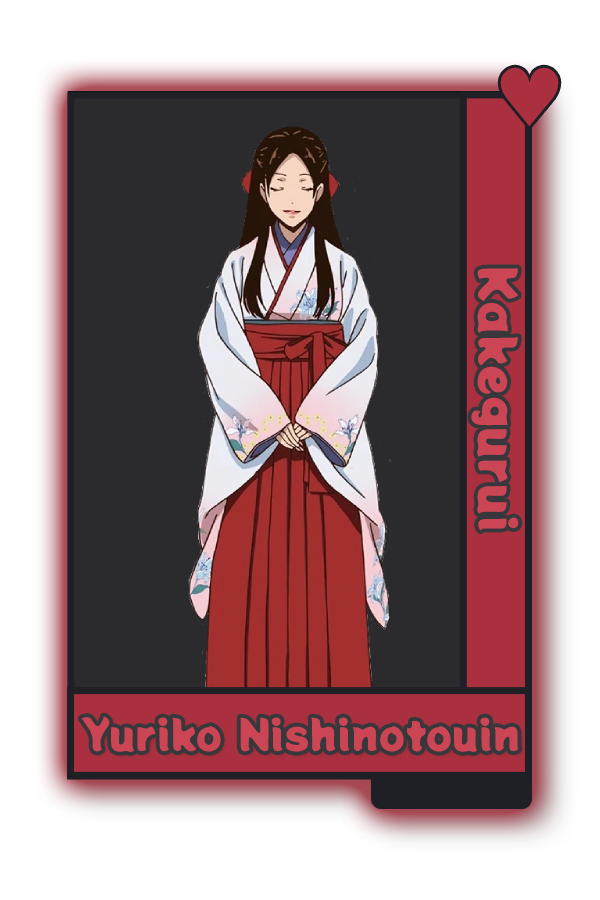
<style>
.page{position:relative;width:600px;height:900px;background:#2b2a2d}
.page>*{position:absolute;margin:0}
.t1{font:80px "DejaVuSans";color:#ab303f}
.t2{font:50px "PottaOne-Regular";color:#cb4554}
.t3{font:42px "PottaOne-Regular";color:#cb4554}
</style>
<div class="page">
<p class="t1" style="left:500px;top:67px;width:59px;height:59px">♥</p>
<p class="t2" style="left:471px;top:268px;width:48px;height:263px;rotate:90deg">Kakegurui</p>
<p class="t3" style="left:81px;top:716px;width:438px;height:37px">Yuriko Nishinotouin</p>
</div>
